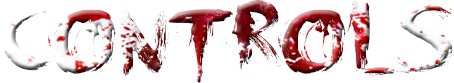
<style>
.page{position:relative;width:454px;height:83px;background:#ffffff}
.page>*{position:absolute;margin:0}
.t1{font:120px "DKFaceYourFears"}
</style>
<div class="page">
<p class="t1" style="left:1px;top:0px;width:453px;height:83px">Controls</p>
</div>
